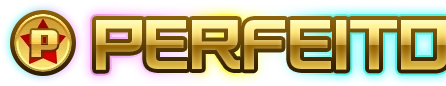
<style>
.page{position:relative;width:446px;height:86px}
.page>*{position:absolute;margin:0}
.t1{font:56px "KafuTechnoStd-U";letter-spacing:0.001em}
</style>
<div class="page">
<p class="t1" style="left:96px;top:20px;width:351px;height:50px">PERFEITO</p>
</div>
